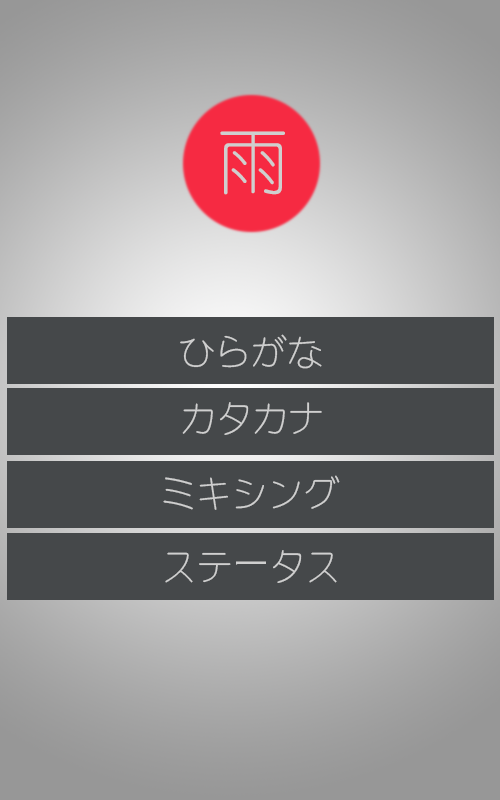
<style>
.page{position:relative;width:500px;height:800px;background:#45484a}
.page>*{position:absolute;margin:0}
.t1{font:72px "TYenRound-Light";color:#cfcfcf}
.t2{font:36px "TYenRound-Light";color:#cfcfcf}
.t3{font:36px "KozGoPr6N-Regular";color:#cfcfcf}
</style>
<div class="page">
<p class="t1" style="left:220px;top:131px;width:65px;height:64px">雨</p>
<p class="t2" style="left:180px;top:334px;width:142px;height:35px">ひらがな</p>
<p class="t2" style="left:182px;top:402px;width:140px;height:33px">カタカナ</p>
<p class="t2" style="left:163px;top:475px;width:177px;height:35px">ミキシング</p>
<p class="t2" style="left:165px;top:550px;width:172px;height:33px">ステ<span class="t3">ー</span>タス</p>
</div>
